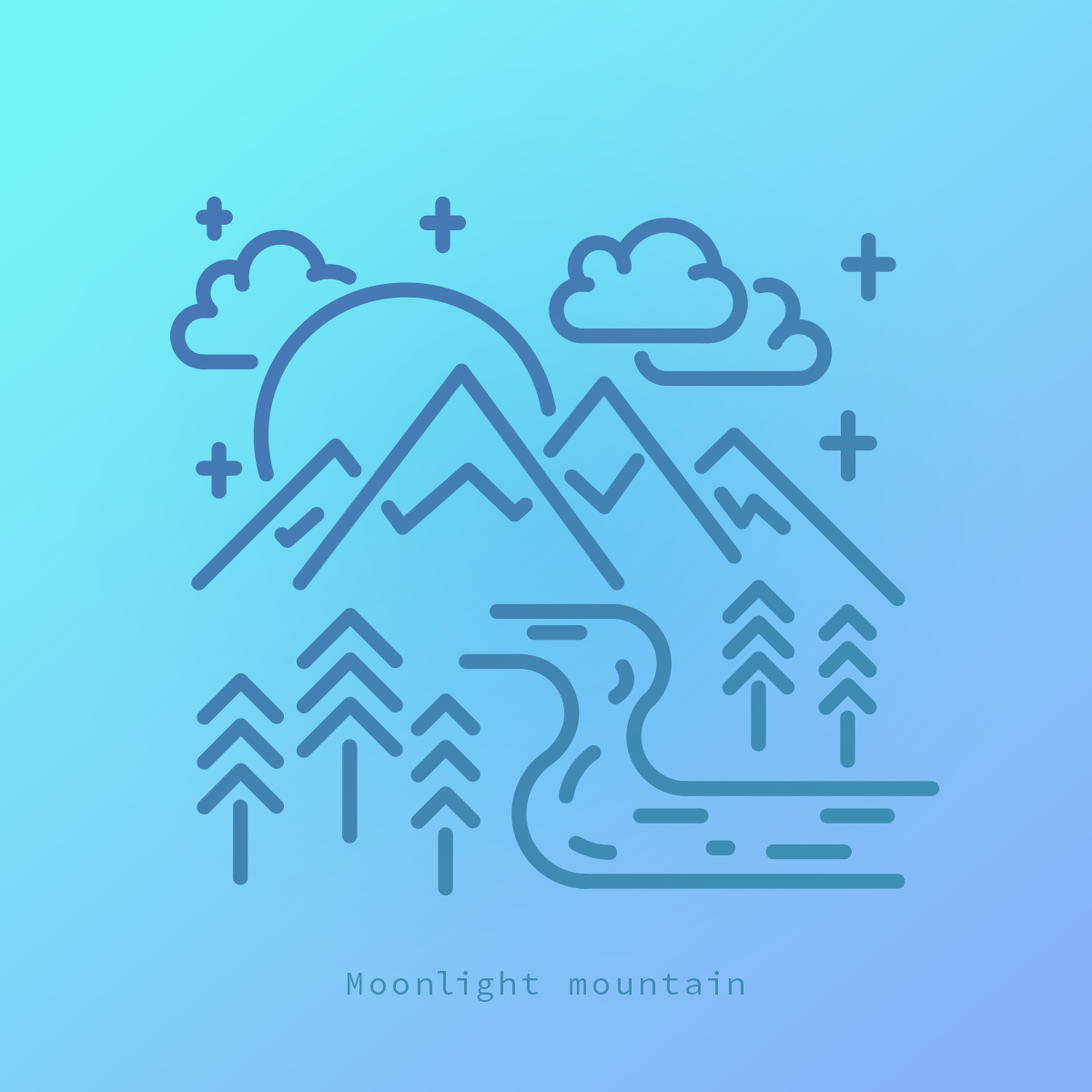
<style>
.page{position:relative;width:1092px;height:1092px}
.page>*{position:absolute;margin:0}
.t1{font:32.8px "SauceCodePowerline-Regular";letter-spacing:0.12em;color:#3d8eb3}
</style>
<div class="page">
<p class="t1" style="left:348px;top:971px;width:395px;height:31px">Moonlight mountain</p>
</div>
